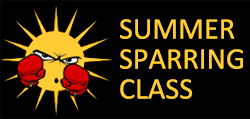
<style>
.page{position:relative;width:250px;height:119px;background:#000000}
.page>*{position:absolute;margin:0}
.t1{font:30.1px/30px "Calibri";color:#ffcc33;text-transform:uppercase}
</style>
<div class="page">
<p class="t1" style="left:120px;top:19px;width:123px;height:80px">Summer<br>SPARRING<br>CLASS</p>
</div>
